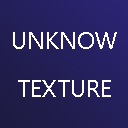
<style>
.page{position:relative;width:128px;height:128px}
.page>*{position:absolute;margin:0}
.t1{font:24px/48px "SegoeUISymbol";color:#ffffff}
.t2{font:11px/48px "SegoeUISymbol";color:#20283d}
</style>
<div class="page">
<p class="t1" style="left:13px;top:32px;width:104px;height:65px;text-align:center"><span class="t2"><br></span>UNKNOW TEXTURE</p>
</div>
